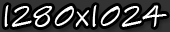
<style>
.page{position:relative;width:170px;height:32px;background:#000000}
.page>*{position:absolute;margin:0}
.t1{font:33.3px "SketchFlowPrint";color:#ffffff}
</style>
<div class="page">
<p class="t1" style="left:4px;top:5px;width:163px;height:22px">1280x1024</p>
</div>
